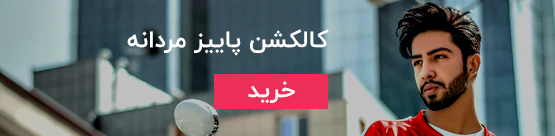
<style>
.page{position:relative;width:555px;height:136px}
.page>*{position:absolute;margin:0}
.t1{font:24px "IRANYekan-Bold";color:#ffffff}
</style>
<div class="page">
<p class="t1" style="left:127px;top:29px;width:202px;height:27px">کالکشن پاییز مردانه</p>
<p class="t1" style="left:248px;top:81px;width:47px;height:22px">خرید</p>
</div>
